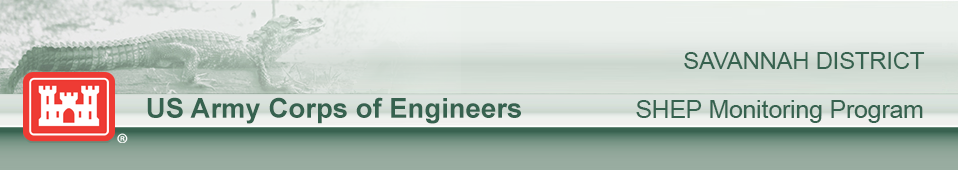
<style>
.page{position:relative;width:958px;height:170px}
.page>*{position:absolute;margin:0}
.t1{font:23.5px "ArialMT";color:#36624f}
.t2{font:27.5px "Arial-BoldMT";color:#36624f}
.t3{font:24.5px "ArialMT";color:#36624f}
</style>
<div class="page">
<p class="t1" style="left:684px;top:52px;width:241px;height:17px">SAVANNAH DISTRICT</p>
<p class="t2" style="left:147px;top:97px;width:374px;height:27px">US Army Corps of Engineers</p>
<p class="t3" style="left:636px;top:100px;width:287px;height:23px">SHEP Monitoring Program</p>
</div>
